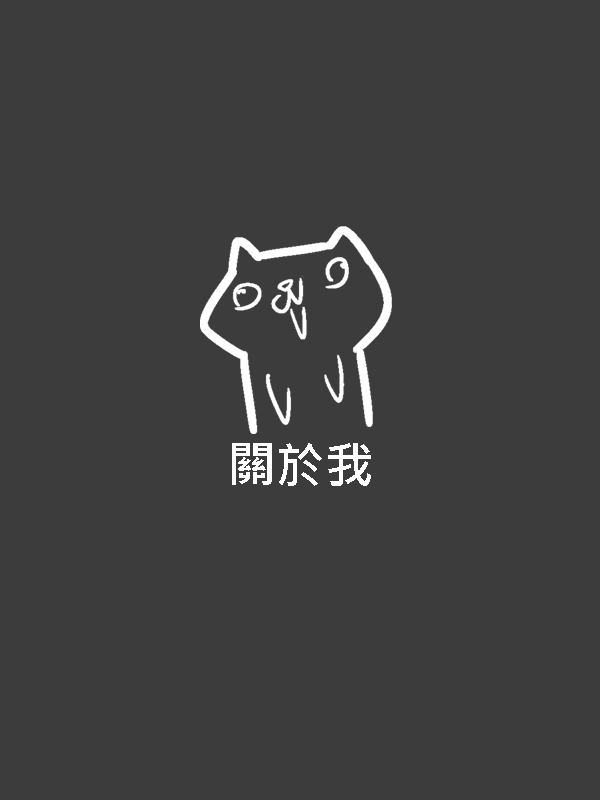
<style>
.page{position:relative;width:600px;height:800px;background:#3c3c3c}
.page>*{position:absolute;margin:0}
.t1{font:49.3px "MicrosoftJhengHeiBold";color:#ffffff}
</style>
<div class="page">
<p class="t1" style="left:232px;top:443px;width:139px;height:43px">關於我</p>
</div>
